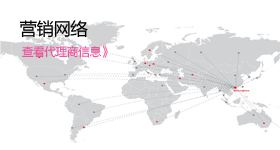
<style>
.page{position:relative;width:280px;height:150px;background:#ffffff}
.page>*{position:absolute;margin:0}
.t1{font:18px "FZLTHJW--GB1-0";letter-spacing:-0.06em;color:#000000}
.t2{font:12px "FZLTXHK";letter-spacing:-0.06em;color:#ed4c9a}
</style>
<div class="page">
<p class="t1" style="left:19px;top:20px;width:69px;height:18px">营销网络</p>
<p class="t2" style="left:22px;top:45px;width:86px;height:13px">查看代理商信息》</p>
</div>
